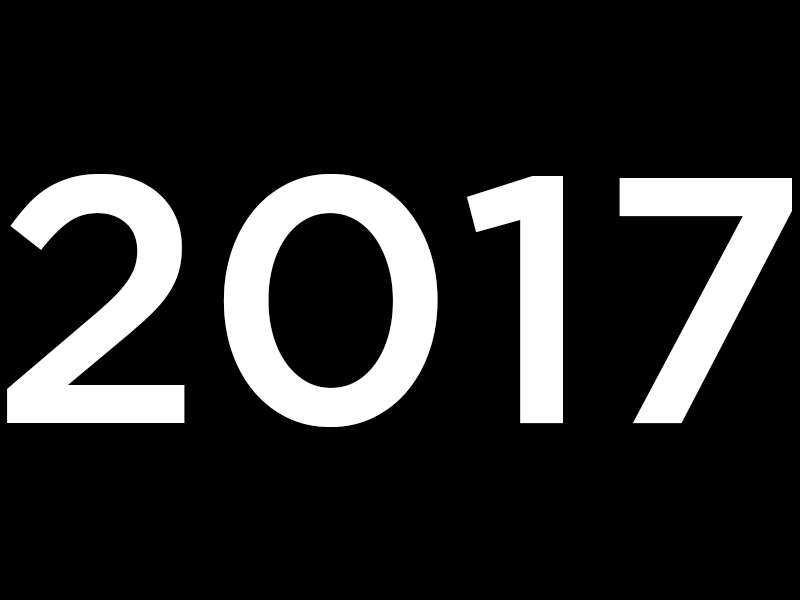
<style>
.page{position:relative;width:800px;height:600px;background:#000000}
.page>*{position:absolute;margin:0}
.t1{font:350px "GothamMedium";color:#ffffff}
</style>
<div class="page">
<p class="t1" style="left:7px;top:174px;width:785px;height:253px">2017</p>
</div>
